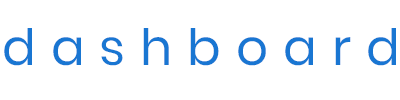
<style>
.page{position:relative;width:400px;height:100px;background:#ffffff}
.page>*{position:absolute;margin:0}
.t1{font:50px "Poppins-Regular";letter-spacing:0.3em;color:#1976d2}
</style>
<div class="page">
<p class="t1" style="left:4px;top:28px;width:392px;height:38px">dashboard</p>
</div>
